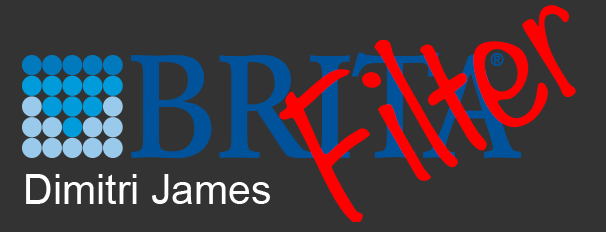
<style>
.page{position:relative;width:606px;height:232px;background:#333333}
.page>*{position:absolute;margin:0}
.t1{font:166px "Noteworthy-Light";color:#ff0000}
.t2{font:41px "ArialMT";color:#ffffff}
</style>
<div class="page">
<p class="t1" style="left:279px;top:5px;width:297px;height:217px;rotate:-30deg">Filter</p>
<p class="t2" style="left:26px;top:174px;width:244px;height:30px">Dimitri James</p>
</div>
